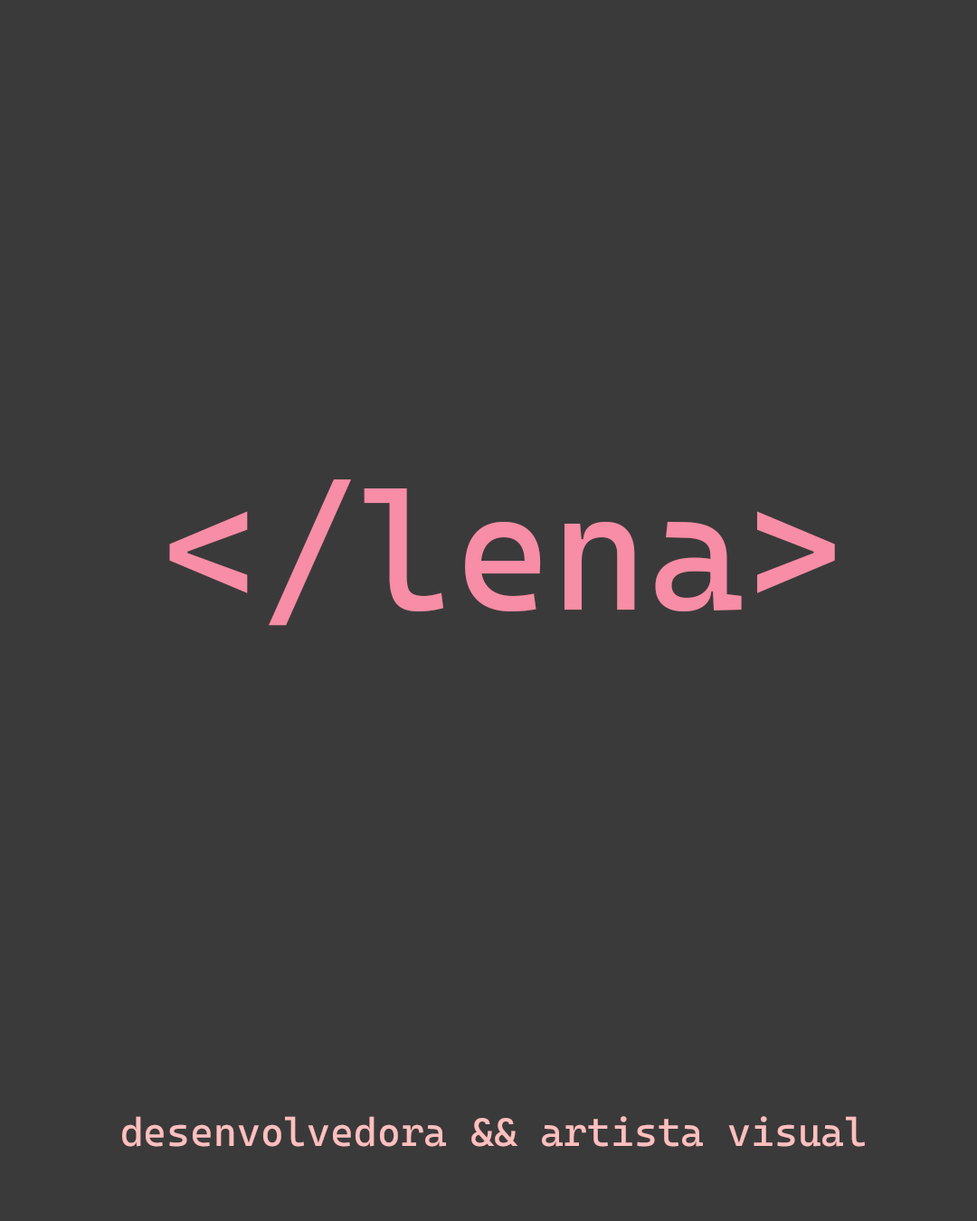
<style>
.page{position:relative;width:977px;height:1221px;background:#3b3a3a}
.page>*{position:absolute;margin:0}
.t1{font:165.8px "CascadiaMono-Roman";color:#f78da6;font-weight:bold}
.t2{font:39.9px "CascadiaMono-Roman";color:#ffbfbf;font-weight:bold}
</style>
<div class="page">
<p class="t1" style="left:169px;top:479px;width:666px;height:147px">&lt;/lena&gt;</p>
<p class="t2" style="left:122px;top:1116px;width:743px;height:31px">desenvolvedora &amp;&amp; artista visual</p>
</div>
